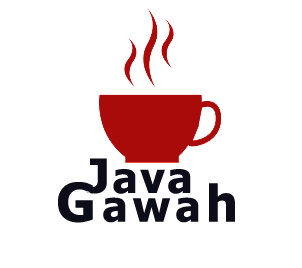
<style>
.page{position:relative;width:302px;height:268px;background:#ffffff}
.page>*{position:absolute;margin:0}
.t1{font:42.2px "Tahoma-Bold";letter-spacing:0.06em;color:#0c0d18}
.t2{font:47.2px "Tahoma-Bold";letter-spacing:0.06em;color:#0c0d18}
.t3{font:42.2px "Tahoma-Bold";letter-spacing:0.12em;color:#0c0d18}
.t4{font:53.2px "Tahoma-Bold";letter-spacing:0.12em;color:#0c0d18}
.t5{font:50.2px "Tahoma-Bold";letter-spacing:0.12em;color:#0c0d18}
</style>
<div class="page">
<p class="t1" style="left:86px;top:158px;width:105px;height:36px"><span class="t2">J</span>ava</p>
<p class="t3" style="left:58px;top:182px;width:177px;height:41px"><span class="t4">G</span>awa<span class="t5">h</span></p>
</div>
